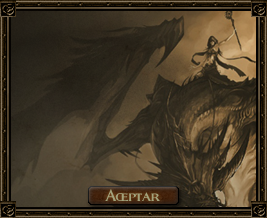
<style>
.page{position:relative;width:267px;height:218px}
.page>*{position:absolute;margin:0}
.t1{font:30px "Fleet-Street";color:#a2a27d}
</style>
<div class="page">
<p class="t1" style="left:105px;top:189px;width:55px;height:12px">Aceptar</p>
</div>
